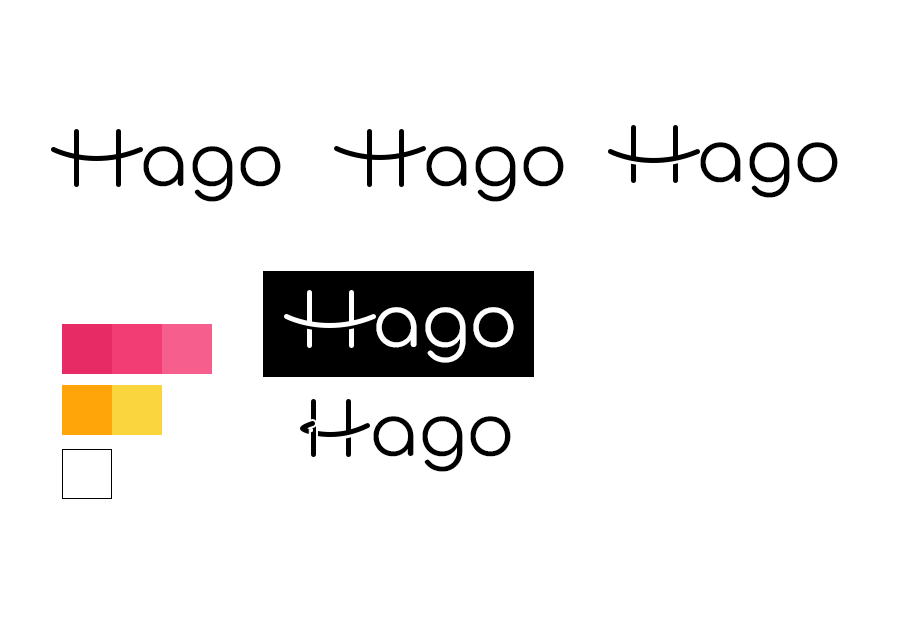
<style>
.page{position:relative;width:900px;height:624px;background:#ffffff}
.page>*{position:absolute;margin:0}
.t1{font:72px "Comfortaa-Regular";color:#000000}
.t2{font:72px "Comfortaa-Regular";color:#ffffff}
</style>
<div class="page">
<p class="t1" style="left:143px;top:146px;width:138px;height:56px">ago</p>
<p class="t1" style="left:426px;top:146px;width:138px;height:56px">ago</p>
<p class="t1" style="left:700px;top:142px;width:138px;height:56px">ago</p>
<p class="t2" style="left:376px;top:307px;width:138px;height:56px">ago</p>
<p class="t1" style="left:373px;top:416px;width:138px;height:56px">ago</p>
</div>
